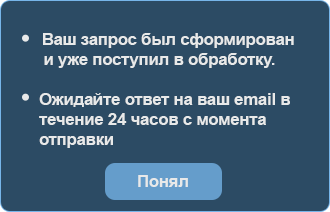
<style>
.page{position:relative;width:330px;height:212px;background:#2c4b64}
.page>*{position:absolute;margin:0}
.t1{font:16.7px "Arial-BoldMT";letter-spacing:-0.01em;color:#e8e9e9}
</style>
<div class="page">
<p class="t1" style="left:39px;top:33px;width:255px;height:115px">Ваш запрос был сформирован<br> и уже поступил в обработку.<br> <br>Ожидайте ответ на ваш email в течение 24 часов с момента отправки</p>
<p class="t1" style="left:138px;top:175px;width:50px;height:12px">Понял</p>
</div>
